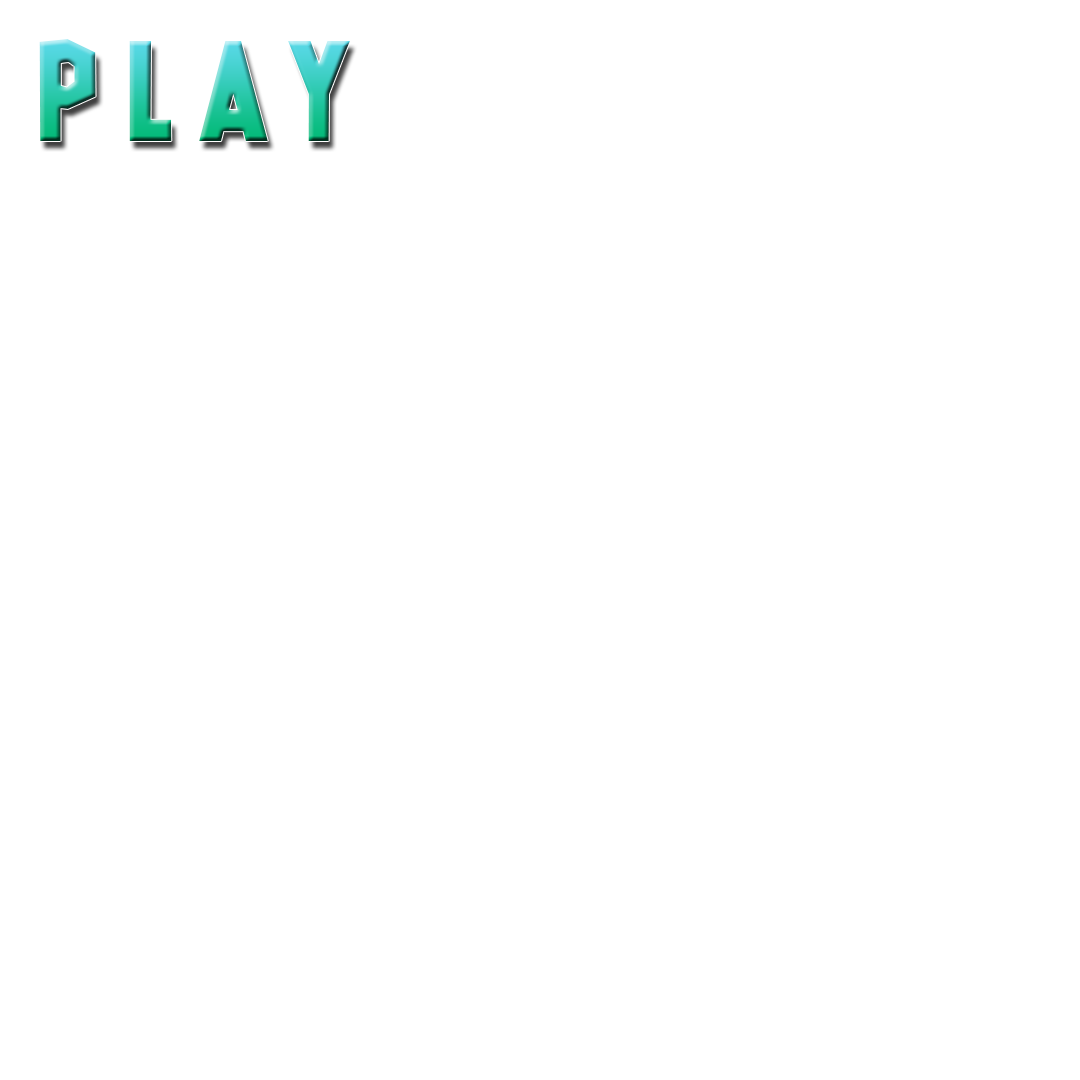
<style>
.page{position:relative;width:1080px;height:1080px;background:#ffffff}
.page>*{position:absolute;margin:0}
.t1{font:33.7px "GlueGun"}
</style>
<div class="page">
<p class="t1" style="left:39px;top:39px;width:311px;height:102px">P L A Y</p>
</div>
